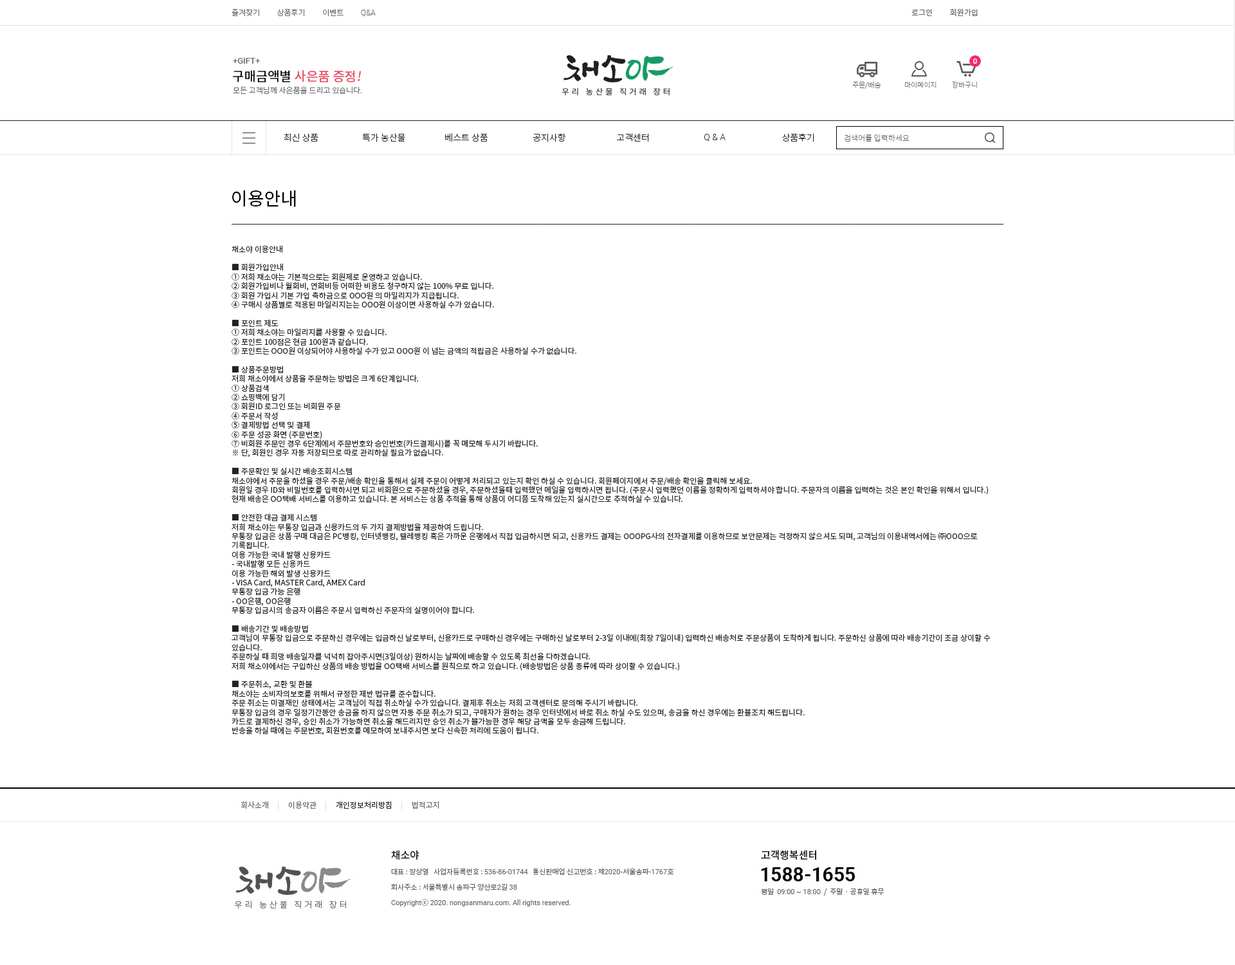
<style>
.page{position:relative;width:1235px;height:965px;background:#ffffff}
.page>*{position:absolute;margin:0}
.t1{font:18px "NotoSansCJKkr-Regular";color:#000000}
.t2{font:7.7px "NotoSansCJKkr-Regular";color:#222222}
</style>
<div class="page">
<p class="t1" style="left:232px;top:190px;width:64px;height:17px">이용안내</p>
<p class="t2" style="left:232px;top:245px;width:759px;height:490px">채소야 이용안내<br><br>■ 회원가입안내<br>① 저희 채소야는 기본적으로는 회원제로 운영하고 있습니다.<br>② 회원가입비나 월회비, 연회비등 어떠한 비용도 청구하지 않는 100% 무료 입니다.<br>③ 회원 가입시 기본 가입 축하금으로 OOO원 의 마일리지가 지급됩니다.<br>④ 구매시 상품별로 적용된 마일리지는는 OOO원 이상이면 사용하실 수가 있습니다.<br><br>■ 포인트 제도<br>① 저희 채소야는 마일리지를 사용할 수 있습니다.<br>② 포인트 100점은 현금 100원과 같습니다.<br>③ 포인트는 OOO원 이상되어야 사용하실 수가 있고 OOO원 이 넘는 금액의 적립금은 사용하실 수가 없습니다.<br><br>■ 상품주문방법<br>저희 채소야에서 상품을 주문하는 방법은 크게 6단계입니다.<br>① 상품검색<br>② 쇼핑백에 담기<br>③ 회원ID 로그인 또는 비회원 주문<br>④ 주문서 작성<br>⑤ 결제방법 선택 및 결제<br>⑥ 주문 성공 화면 (주문번호)<br>⑦ 비회원 주문인 경우 6단계에서 주문번호와 승인번호(카드결제시)를 꼭 메모해 두시기 바랍니다.<br>※ 단, 회원인 경우 자동 저장되므로 따로 관리하실 필요가 없습니다.<br><br>■ 주문확인 및 실시간 배송조회시스템<br>채소야에서 주문을 하셨을 경우 주문/배송 확인을 통해서 실제 주문이 어떻게 처리되고 있는지 확인 하실 수 있습니다. 회원페이지에서 주문/배송 확인을 클릭해 보세요.<br>회원일 경우 ID와 비밀번호를 입력하시면 되고 비회원으로 주문하셨을 경우, 주문하셨을때 입력했던 메일을 입력하시면 됩니다. (주문시 입력했던 이름을 정확하게 입력하셔야 합니다. 주문자의 이름을 입력하는 것은 본인 확인을 위해서 입니다.)<br>현재 배송은 OO택배 서비스를 이용하고 있습니다. 본 서비스는 상품 추적을 통해 상품이 어디쯤 도착해 있는지 실시간으로 추적하실 수 있습니다.<br><br>■ 안전한 대금 결제 시스템<br>저희 채소야는 무통장 입금과 신용카드의 두 가지 결제방법을 제공하여 드립니다.<br>무통장 입금은 상품 구매 대금은 PC뱅킹, 인터넷뱅킹, 텔레뱅킹 혹은 가까운 은행에서 직접 입금하시면 되고, 신용카드 결제는 OOOPG사의 전자결제를 이용하므로 보안문제는 걱정하지 않으셔도 되며, 고객님의 이용내역서에는 ㈜OOO으로 기록됩니다.<br>이용 가능한 국내 발행 신용카드<br>- 국내발행 모든 신용카드<br>이용 가능한 해외 발생 신용카드<br>- VISA Card, MASTER Card, AMEX Card<br>무통장 입금 가능 은행<br>- OO은행, OO은행<br>무통장 입금시의 송금자 이름은 주문시 입력하신 주문자의 실명이어야 합니다.<br><br>■ 배송기간 및 배송방법<br>고객님이 무통장 입금으로 주문하신 경우에는 입금하신 날로부터, 신용카드로 구매하신 경우에는 구매하신 날로부터 2-3일 이내에(최장 7일이내) 입력하신 배송처로 주문상품이 도착하게 됩니다. 주문하신 상품에 따라 배송기간이 조금 상이할 수 있습니다.<br>주문하실 때 희망 배송일자를 넉넉히 잡아주시면(3일이상) 원하시는 날짜에 배송할 수 있도록 최선을 다하겠습니다.<br>저희 채소야에서는 구입하신 상품의 배송 방법을 OO택배 서비스를 원칙으로 하고 있습니다. (배송방법은 상품 종류에 따라 상이할 수 있습니다.)<br><br>■ 주문취소, 교환 및 환불<br>채소야는 소비자의보호를 위해서 규정한 제반 법규를 준수합니다.<br>주문 취소는 미결재인 상태에서는 고객님이 직접 취소하실 수가 있습니다. 결제후 취소는 저희 고객센터로 문의해 주시기 바랍니다.<br>무통장 입금의 경우 일정기간동안 송금을 하지 않으면 자동 주문 취소가 되고, 구매자가 원하는 경우 인터넷에서 바로 취소 하실 수도 있으며, 송금을 하신 경우에는 환불조치 해드립니다.<br>카드로 결제하신 경우, 승인 취소가 가능하면 취소을 해드리지만 승인 취소가 불가능한 경우 해당 금액을 모두 송금해 드립니다.<br>반송을 하실 때에는 주문번호, 회원번호를 메모하여 보내주시면 보다 신속한 처리에 도움이 됩니다.</p>
</div>
